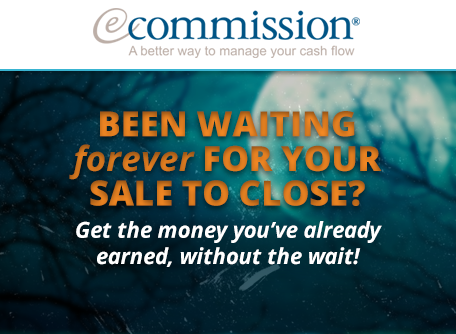
<style>
.page{position:relative;width:456px;height:334px}
.page>*{position:absolute;margin:0}
.t1{font:34.6px/34.6px "OpenSans-Extrabold";color:#d4771f;text-transform:uppercase}
.t2{font:34.6px/34.6px "OpenSans-BoldItalic";color:#d4771f}
.t3{font:21.9px "OpenSans-BoldItalic";color:#ffffff}
</style>
<div class="page">
<p class="t1" style="left:69px;top:111px;width:313px;height:95px;text-align:center">Been waiting <span class="t2">forever</span> for your sale to close?</p>
<p class="t3" style="left:76px;top:221px;width:306px;height:46px;text-align:center">Get the money you’ve already earned, without the wait!</p>
</div>
